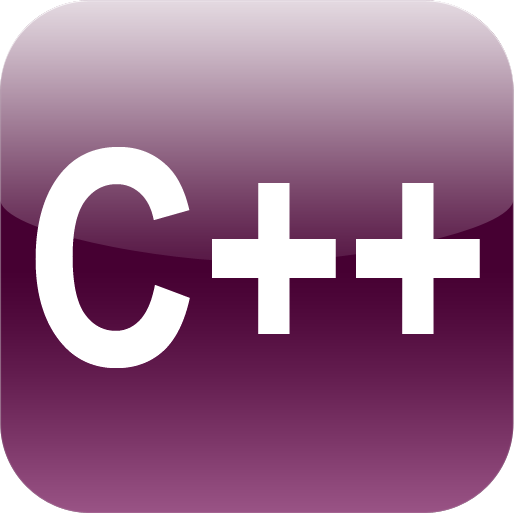
<style>
.page{position:relative;width:514px;height:513px}
.page>*{position:absolute;margin:0}
.t1{font:300.4px "ArialNarrow-Bold";color:#ffffff}
</style>
<div class="page">
<p class="t1" style="left:35px;top:147px;width:445px;height:221px">C++</p>
</div>
